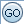
<style>
.page{position:relative;width:25px;height:25px;background:#ffffff}
.page>*{position:absolute;margin:0}
.t1{font:11px "Verdana";letter-spacing:-0.06em;color:#032647}
</style>
<div class="page">
<p class="t1" style="left:5px;top:9px;width:15px;height:8px">GO</p>
</div>
